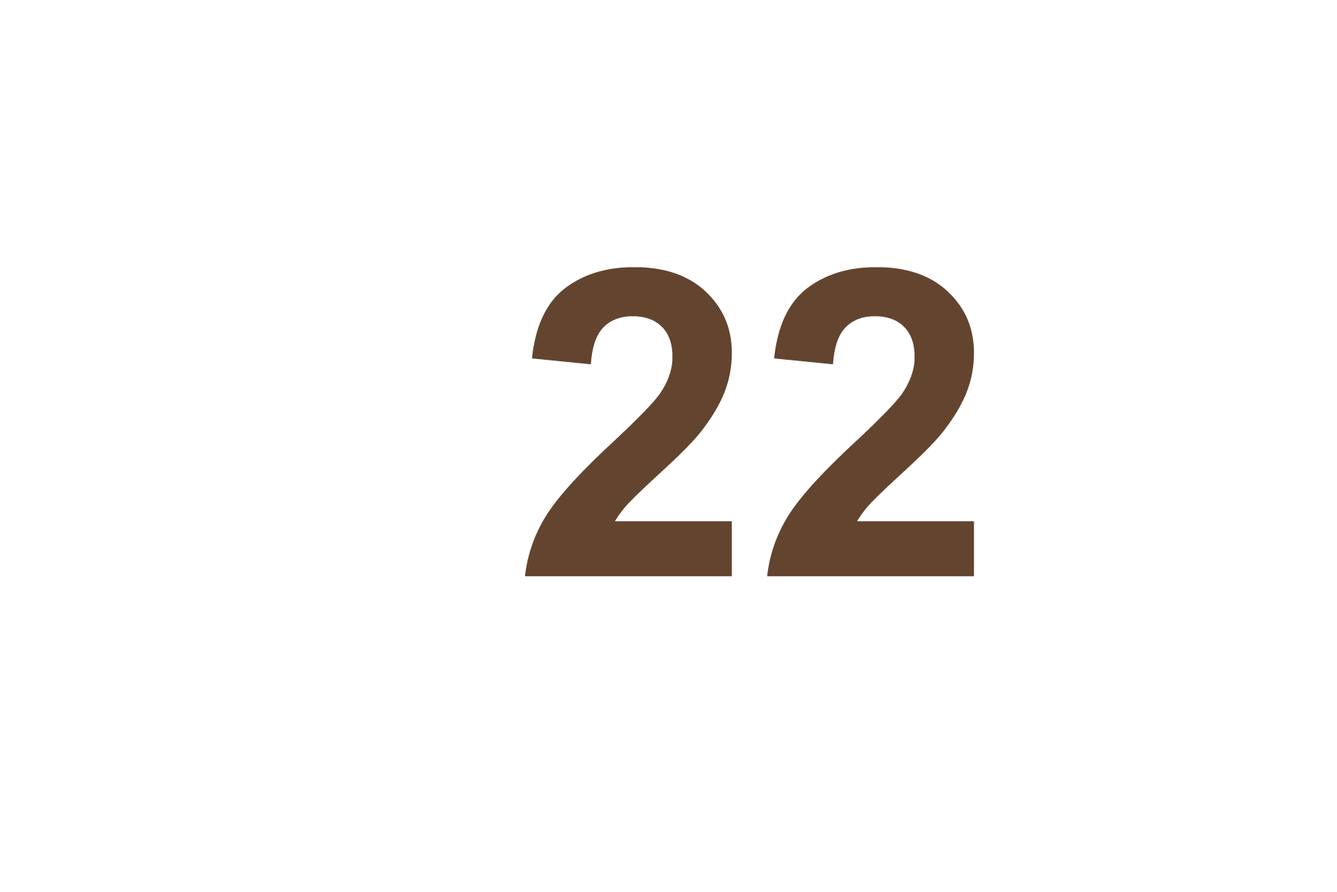
<style>
.page{position:relative;width:1337px;height:892px;background:#ffffff}
.page>*{position:absolute;margin:0}
.t1{font:429.6px "Arial-BoldMT";color:#63442f}
</style>
<div class="page">
<p class="t1" style="left:525px;top:267px;width:450px;height:310px">22</p>
</div>
